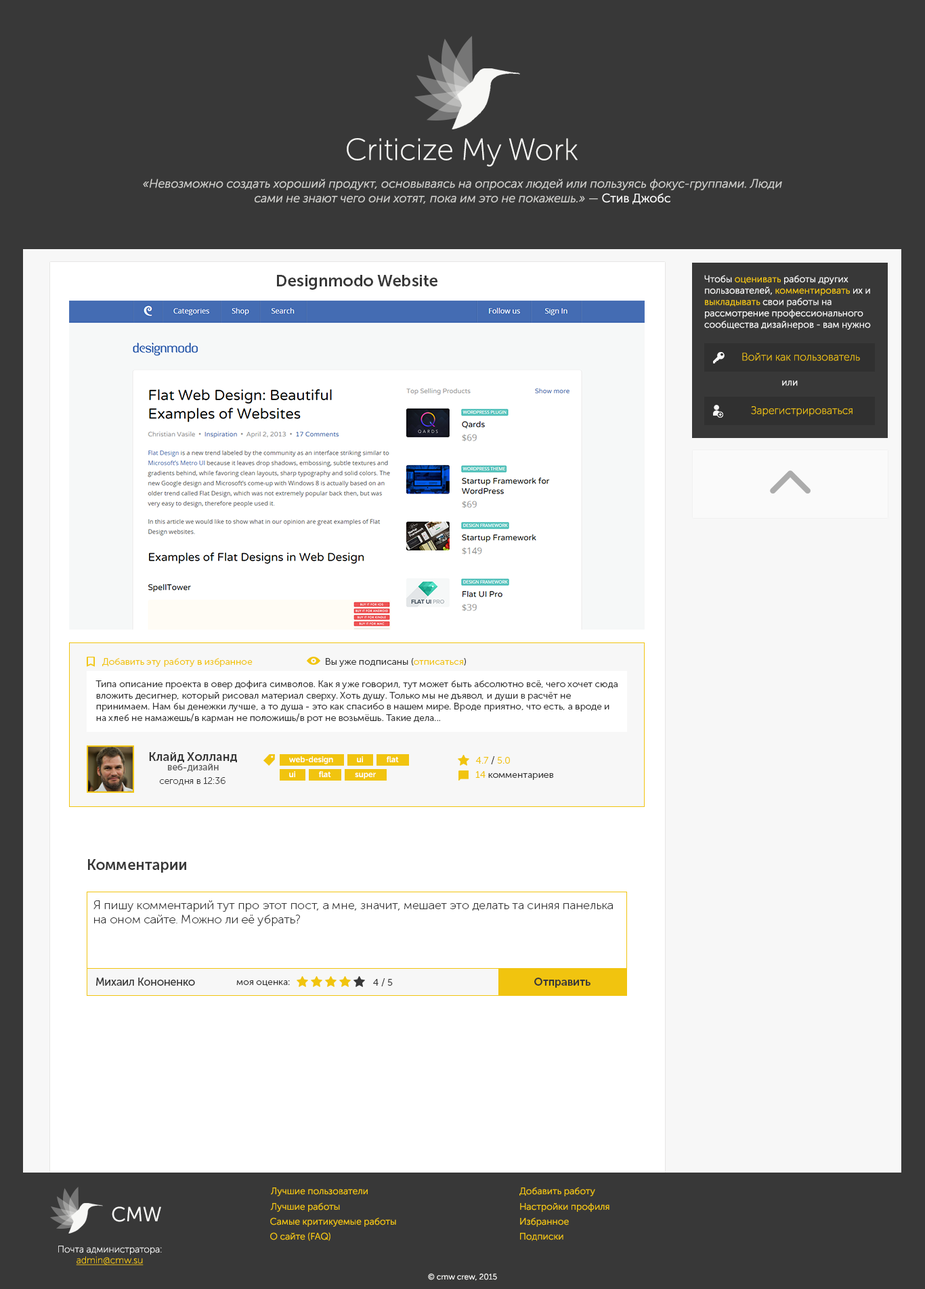
<style>
.page{position:relative;width:925px;height:1289px;background:#383838}
.page>*{position:absolute;margin:0}
.t1{font:30.5px "MuseoSansCyrl-100";color:#f7f7f5}
.t2{font:12.2px "MuseoSansCyrl-300Italic";color:#cfcfcc}
.t3{font:12.2px "MuseoSansCyrl-300";color:#cfcfcc}
.t4{font:12.2px "MuseoSansCyrl-300";color:#ffffff}
.t5{font:16.3px "MuseoSansCyrl-700";color:#383838}
.t6{font:9.5px "MuseoSansCyrl-300";color:#f7f7f7}
.t7{font:9.5px "MuseoSansCyrl-300";color:#f1c40f}
.t8{font:10.8px "MuseoSansCyrl-100";color:#f1c40f}
.t9{font:9.5px "MuseoSansCyrl-300";color:#383838}
.t10{font:12.2px "MuseoSansCyrl-700";color:#383838}
.t11{font:8.1px "MuseoSansCyrl-500";color:#ffffff}
.t12{font:9.5px "MuseoSansCyrl-500";color:#626262}
.t13{font:9.5px "MuseoSansCyrl-100";color:#383838}
.t14{font:14.9px "MuseoSansCyrl-700";color:#383838}
.t15{font:12.2px "MuseoSansCyrl-100";color:#383838}
.t16{font:10.8px "MuseoSansCyrl-500";color:#383838}
.t17{font:10.8px "MuseoSansCyrl-700";color:#383838}
.t18{font:20.3px "MuseoSansCyrl-300";color:#f7f7f5}
.t19{font:9.5px "MuseoSansCyrl-100";color:#f7f7f7}
.t20{font:9.5px "MuseoSansCyrl-100";color:#f1c40f;text-decoration:underline}
.t21{font:8.1px "MuseoSansCyrl-300";color:#f7f7f5}
</style>
<div class="page">
<p class="t1" style="left:347px;top:138px;width:231px;height:29px">Criticize My Work</p>
<p class="t2" style="left:143px;top:179px;width:639px;height:25px;text-align:center">«Невозможно создать хороший продукт, основываясь на опросах людей или пользуясь фокус-группами. Люди сами не знают чего они хотят, пока им это не покажешь.» <span class="t3">— </span><span class="t4">Стив Джобс</span></p>
<p class="t5" style="left:277px;top:275px;width:160px;height:15px">Designmodo Website</p>
<p class="t6" style="left:704px;top:275px;width:167px;height:55px;text-align:right">Чтобы <span class="t7">оценивать</span> работы других пользователей, <span class="t7">комментировать</span> их и <span class="t7">выкладывать</span> свои работы на рассмотрение профессионального сообщества дизайнеров - вам нужно</p>
<p class="t8" style="left:742px;top:353px;width:118px;height:8px">Войти как пользователь</p>
<p class="t6" style="left:782px;top:381px;width:16px;height:5px">или</p>
<p class="t8" style="left:751px;top:406px;width:101px;height:10px">Зарегистрироваться</p>
<p class="t7" style="left:102px;top:658px;width:151px;height:9px">Добавить эту работу в избранное</p>
<p class="t9" style="left:326px;top:658px;width:140px;height:9px">Вы уже подписаны (<span class="t7">отписаться</span>)</p>
<p class="t9" style="left:95px;top:680px;width:523px;height:43px">Типа описание проекта в овер дофига символов. Как я уже говорил, тут может быть абсолютно всё, чего хочет сюда вложить десигнер, который рисовал материал сверху. Хоть душу. Только мы не дъявол, и души в расчёт не принимаем. Нам бы денежки лучше, а то душа - это как спасибо в нашем мире. Вроде приятно, что есть, а вроде и на хлеб не намажешь/в карман не положишь/в рот не возьмёшь. Такие дела...</p>
<p class="t10" style="left:149px;top:752px;width:88px;height:10px">Клайд Холланд</p>
<p class="t11" style="left:289px;top:756px;width:44px;height:8px">web-design</p>
<p class="t11" style="left:357px;top:756px;width:6px;height:6px">ui</p>
<p class="t11" style="left:387px;top:756px;width:12px;height:6px">flat</p>
<p class="t7" style="left:475px;top:756px;width:35px;height:8px">4.7 <span class="t9">/</span> 5.0</p>
<p class="t12" style="left:168px;top:764px;width:51px;height:8px">веб-дизайн</p>
<p class="t11" style="left:289px;top:771px;width:6px;height:6px">ui</p>
<p class="t11" style="left:319px;top:771px;width:12px;height:6px">flat</p>
<p class="t11" style="left:355px;top:773px;width:21px;height:6px">super</p>
<p class="t9" style="left:475px;top:771px;width:78px;height:9px"><span class="t7">14</span> комментариев</p>
<p class="t13" style="left:159px;top:777px;width:66px;height:8px">сегодня в 12:36</p>
<p class="t14" style="left:88px;top:859px;width:98px;height:14px">Комментарии</p>
<p class="t15" style="left:93px;top:901px;width:520px;height:25px">Я пишу комментарий тут про этот пост, а мне, значит, мешает это делать та синяя панелька на оном сайте. Можно ли её убрать?</p>
<p class="t16" style="left:96px;top:978px;width:99px;height:8px">Михаил Кононенко</p>
<p class="t17" style="left:534px;top:978px;width:56px;height:10px">Отправить</p>
<p class="t9" style="left:236px;top:980px;width:54px;height:7px">моя оценка:</p>
<p class="t9" style="left:373px;top:978px;width:20px;height:9px">4 / 5</p>
<p class="t7" style="left:271px;top:1188px;width:97px;height:8px">Лучшие пользователи</p>
<p class="t7" style="left:519px;top:1187px;width:76px;height:9px">Добавить работу</p>
<p class="t7" style="left:270px;top:1203px;width:70px;height:9px">Лучшие работы</p>
<p class="t7" style="left:520px;top:1203px;width:89px;height:9px">Настройки профиля</p>
<p class="t18" style="left:112px;top:1207px;width:49px;height:15px">CMW</p>
<p class="t7" style="left:270px;top:1217px;width:126px;height:10px">Самые критикуемые работы</p>
<p class="t7" style="left:520px;top:1217px;width:49px;height:10px">Избранное</p>
<p class="t7" style="left:270px;top:1232px;width:60px;height:9px">О сайте (FAQ)</p>
<p class="t7" style="left:520px;top:1233px;width:43px;height:8px">Подписки</p>
<p class="t19" style="left:58px;top:1246px;width:104px;height:9px">Почта администратора:</p>
<p class="t20" style="left:76px;top:1257px;width:68px;height:9px">admin@cmw.su</p>
<p class="t21" style="left:428px;top:1274px;width:69px;height:7px">© cmw crew, 2015</p>
</div>
